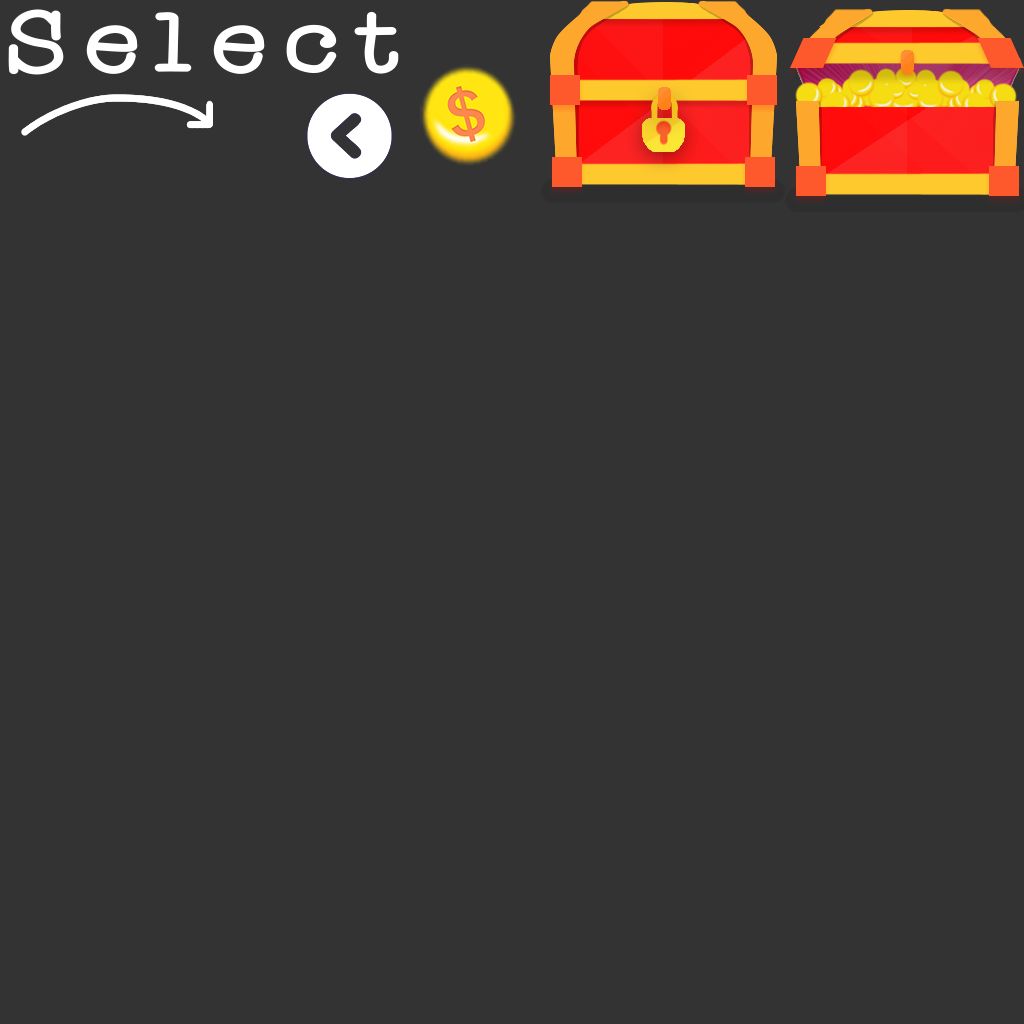
<style>
.page{position:relative;width:1024px;height:1024px;background:#333333}
.page>*{position:absolute;margin:0}
.t1{font:85.8px "ATypewriterForMe";letter-spacing:0.06em;color:#ffffff;font-weight:bold;scale:1.29 1}
</style>
<div class="page">
<p class="t1" style="left:8px;top:9px;width:391px;height:66px">Select</p>
</div>
